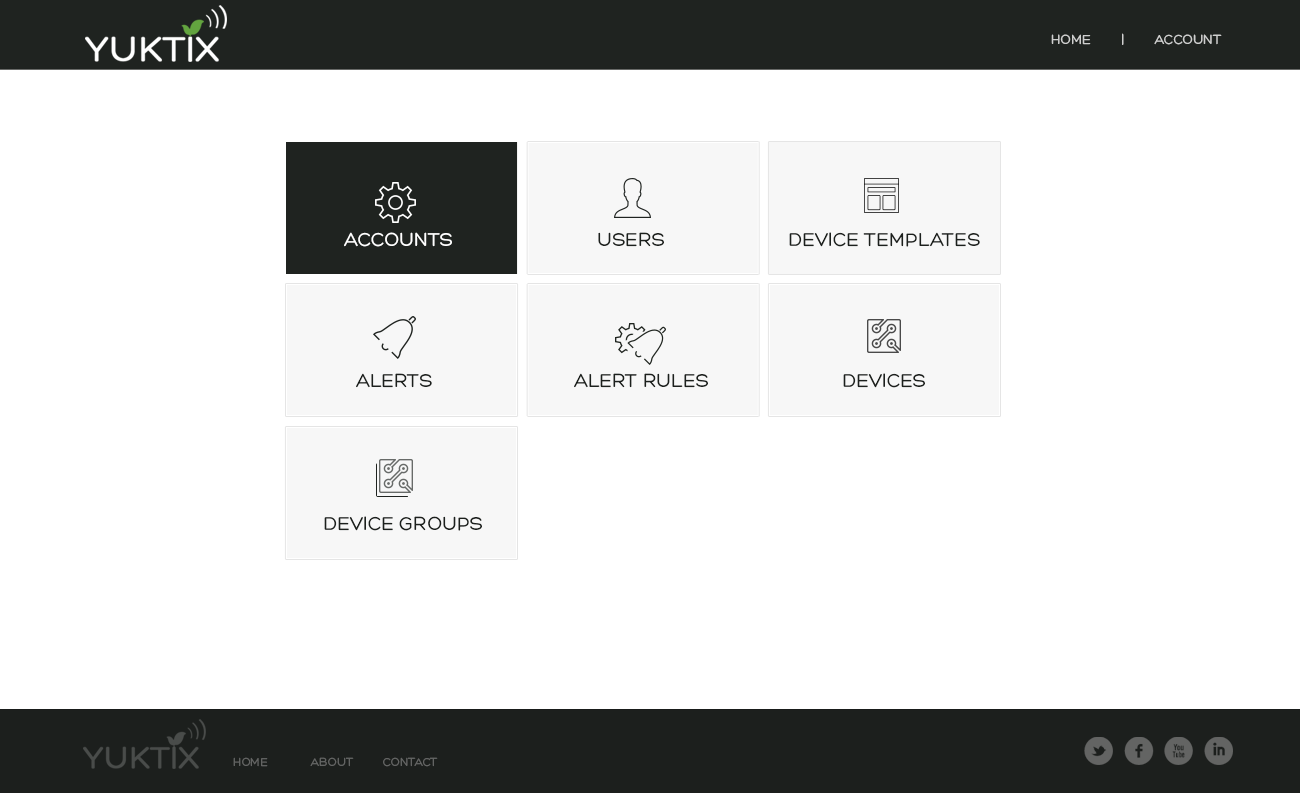
<style>
.page{position:relative;width:1300px;height:793px;background:#ffffff}
.page>*{position:absolute;margin:0}
.t1{font:14px "Hero";color:#cecfce;text-transform:uppercase}
.t2{font:20px "Hero";color:#ffffff;text-transform:uppercase}
.t3{font:20px "Hero";color:#1c201d;text-transform:uppercase}
.t4{font:40.5px "Socialico";letter-spacing:0.2em;color:#636463}
.t5{font:12.2px "Hero";color:#636463;text-transform:uppercase}
</style>
<div class="page">
<p class="t1" style="left:1051px;top:33px;width:171px;height:12px">home        |        Account</p>
<p class="t2" style="left:344px;top:232px;width:108px;height:15px">Accounts</p>
<p class="t3" style="left:598px;top:232px;width:66px;height:15px">Users</p>
<p class="t3" style="left:789px;top:232px;width:191px;height:15px">Device Templates</p>
<p class="t3" style="left:356px;top:373px;width:76px;height:15px">Alerts</p>
<p class="t3" style="left:574px;top:373px;width:134px;height:15px">alert rules</p>
<p class="t3" style="left:843px;top:373px;width:82px;height:15px">devices</p>
<p class="t3" style="left:324px;top:516px;width:158px;height:15px">Device Groups</p>
<p class="t4" style="left:1084px;top:737px;width:149px;height:28px">lfxi</p>
<p class="t5" style="left:233px;top:757px;width:205px;height:10px">home             About         Contact</p>
</div>
